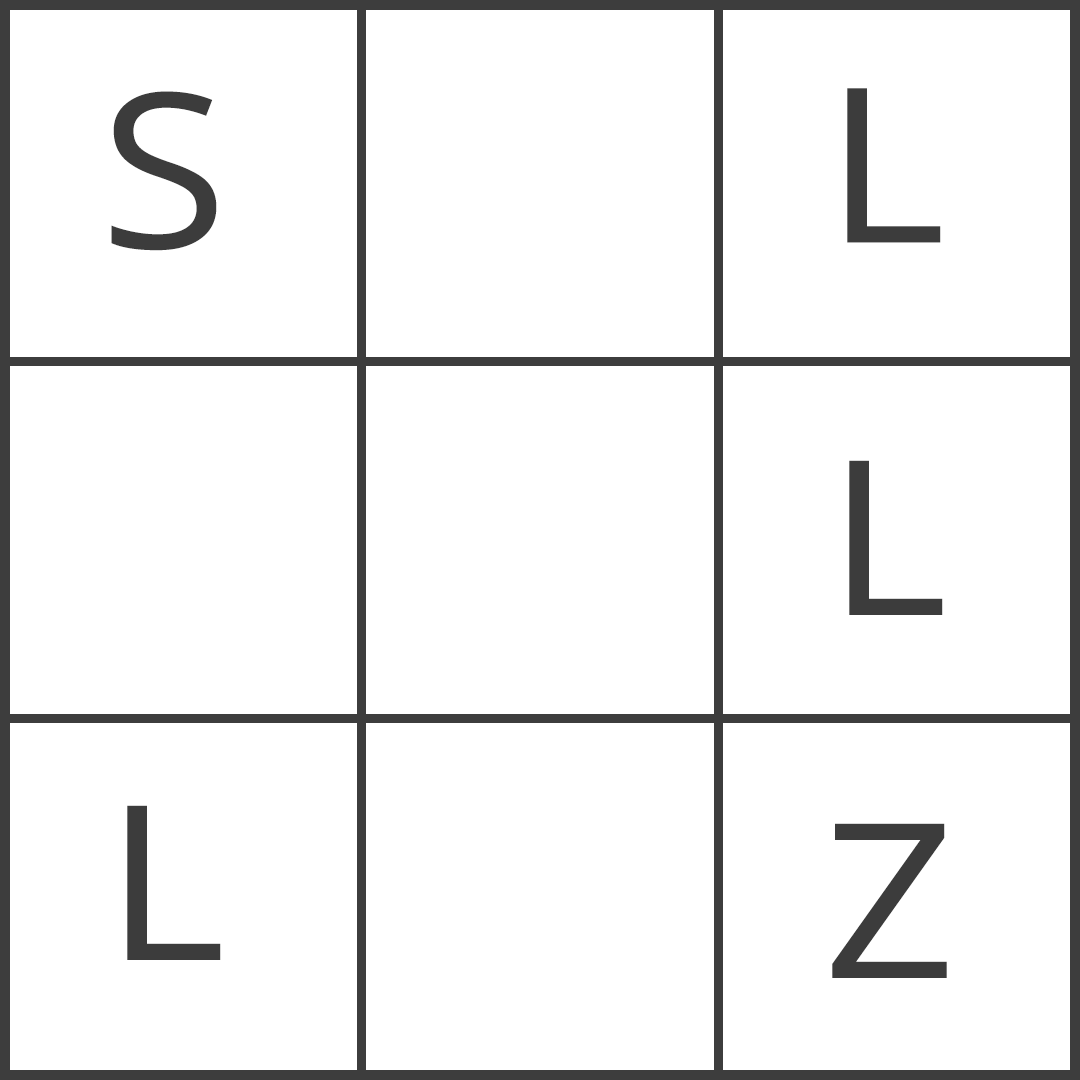
<style>
.page{position:relative;width:1080px;height:1080px;background:#ffffff}
.page>*{position:absolute;margin:0}
.t1{font:216px "OpenSans-Regular";letter-spacing:0.06em;color:#3c3c3c;scale:1.08 1}
</style>
<div class="page">
<p class="t1" style="left:847px;top:88px;width:94px;height:155px">L</p>
<p class="t1" style="left:111px;top:91px;width:106px;height:160px">S</p>
<p class="t1" style="left:849px;top:460px;width:94px;height:155px">L</p>
<p class="t1" style="left:127px;top:805px;width:94px;height:155px">L</p>
<p class="t1" style="left:832px;top:823px;width:115px;height:155px">Z</p>
</div>
